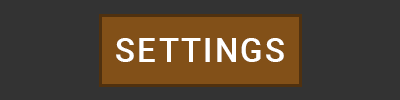
<style>
.page{position:relative;width:400px;height:100px;background:#333333}
.page>*{position:absolute;margin:0}
.t1{font:33.3px "Roboto-Medium";letter-spacing:0.06em;color:#ffffff}
</style>
<div class="page">
<p class="t1" style="left:116px;top:38px;width:168px;height:24px">SETTINGS</p>
</div>
